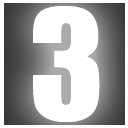
<style>
.page{position:relative;width:128px;height:128px;background:#ffffff}
.page>*{position:absolute;margin:0}
.t1{font:142.1px "Impact";color:#ffffff}
</style>
<div class="page">
<p class="t1" style="left:33px;top:6px;width:67px;height:116px">3</p>
</div>
